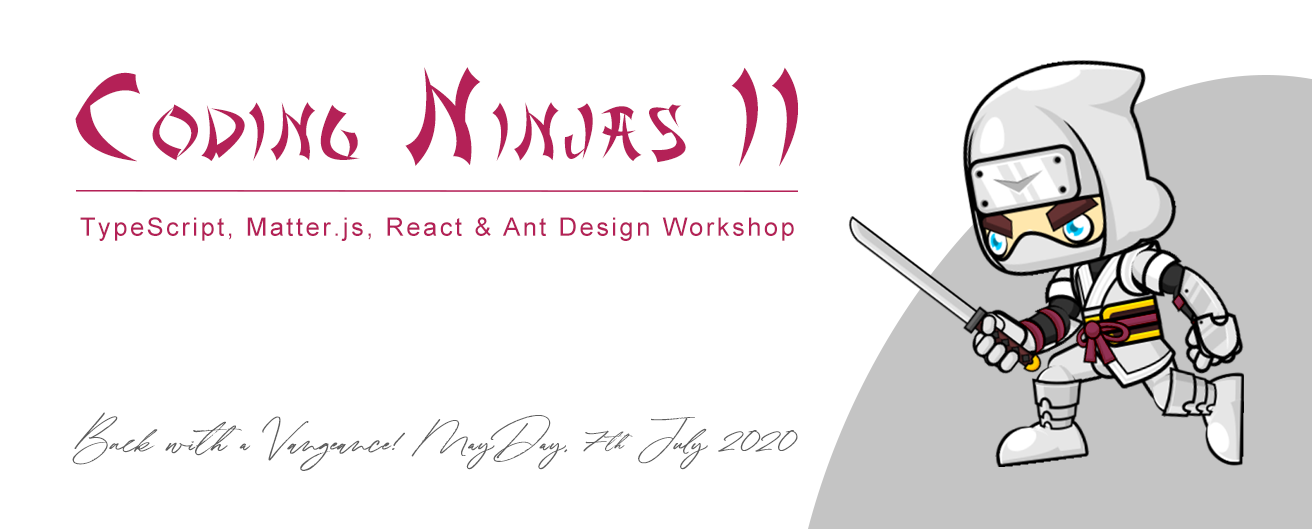
<style>
.page{position:relative;width:1312px;height:529px;background:#ffffff}
.page>*{position:absolute;margin:0}
.t1{font:72.1px "AsianDelight";letter-spacing:0.1em;color:#b42157;scale:0.93 1}
.t2{font:120.2px "AsianDelight";letter-spacing:0.1em;color:#b42157;scale:0.93 1}
.t3{font:25.4px "ArialMT";letter-spacing:0.1em;color:#b42157}
.t4{font:20.4px/83.3px "Winterlady";color:#5e5e5e;font-weight:bold}
</style>
<div class="page">
<p class="t1" style="left:75px;top:67px;width:724px;height:100px"><span class="t2">C</span>ODING<span class="t2"> N</span>INJAS<span class="t2"> II</span></p>
<p class="t3" style="left:80px;top:217px;width:714px;height:24px">TypeScript, Matter.js, React &amp; Ant Design Workshop</p>
<p class="t4" style="left:72px;top:412px;width:726px;height:59px">Back with a Vangeance! MayDay, 7th July 2020</p>
</div>
